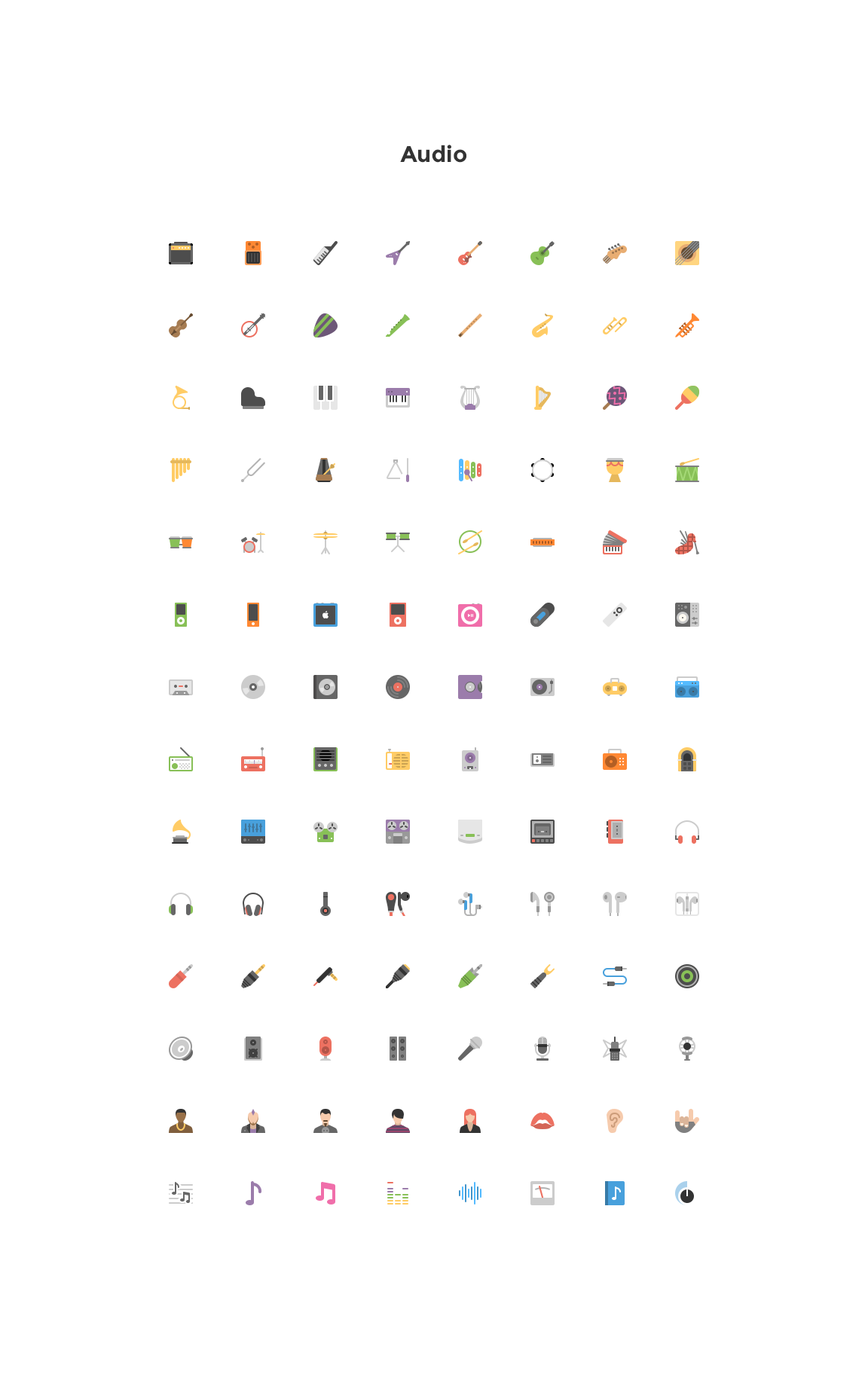
<style>
.page{position:relative;width:868px;height:1374px;background:#ffffff}
.page>*{position:absolute;margin:0}
.t1{font:22.6px "Montserrat-Bold";color:#333333}
</style>
<div class="page">
<p class="t1" style="left:400px;top:145px;width:66px;height:18px">Audio</p>
</div>
